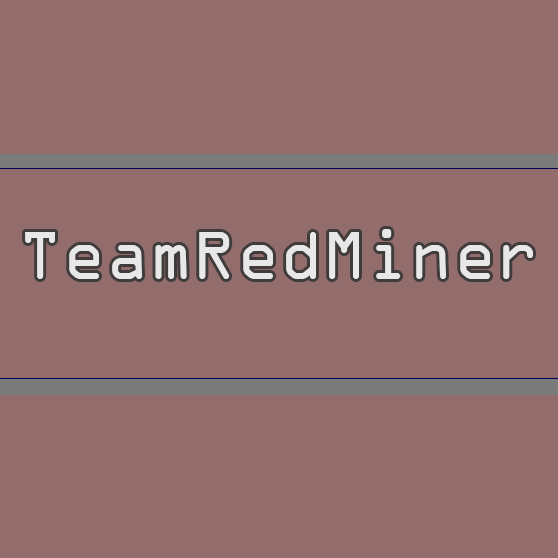
<style>
.page{position:relative;width:558px;height:558px;background:#936c6c}
.page>*{position:absolute;margin:0}
.t1{font:72px "OCRAExtended";color:#e8e8e8}
</style>
<div class="page">
<p class="t1" style="left:25px;top:229px;width:508px;height:50px">TeamRedMiner</p>
</div>
